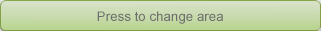
<style>
.page{position:relative;width:321px;height:31px}
.page>*{position:absolute;margin:0}
.t1{font:13.3px "ArialMT";color:#6e6e6e}
</style>
<div class="page">
<p class="t1" style="left:97px;top:11px;width:126px;height:13px">Press to change area</p>
</div>
